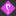
<style>
.page{position:relative;width:16px;height:16px;background:#333333}
.page>*{position:absolute;margin:0}
.t1{font:12.3px "TimesNewRomanPSMT";color:#ffffff;scale:0.92 1}
</style>
<div class="page">
<p class="t1" style="left:6px;top:4px;width:5px;height:9px;rotate:180deg">?</p>
</div>
